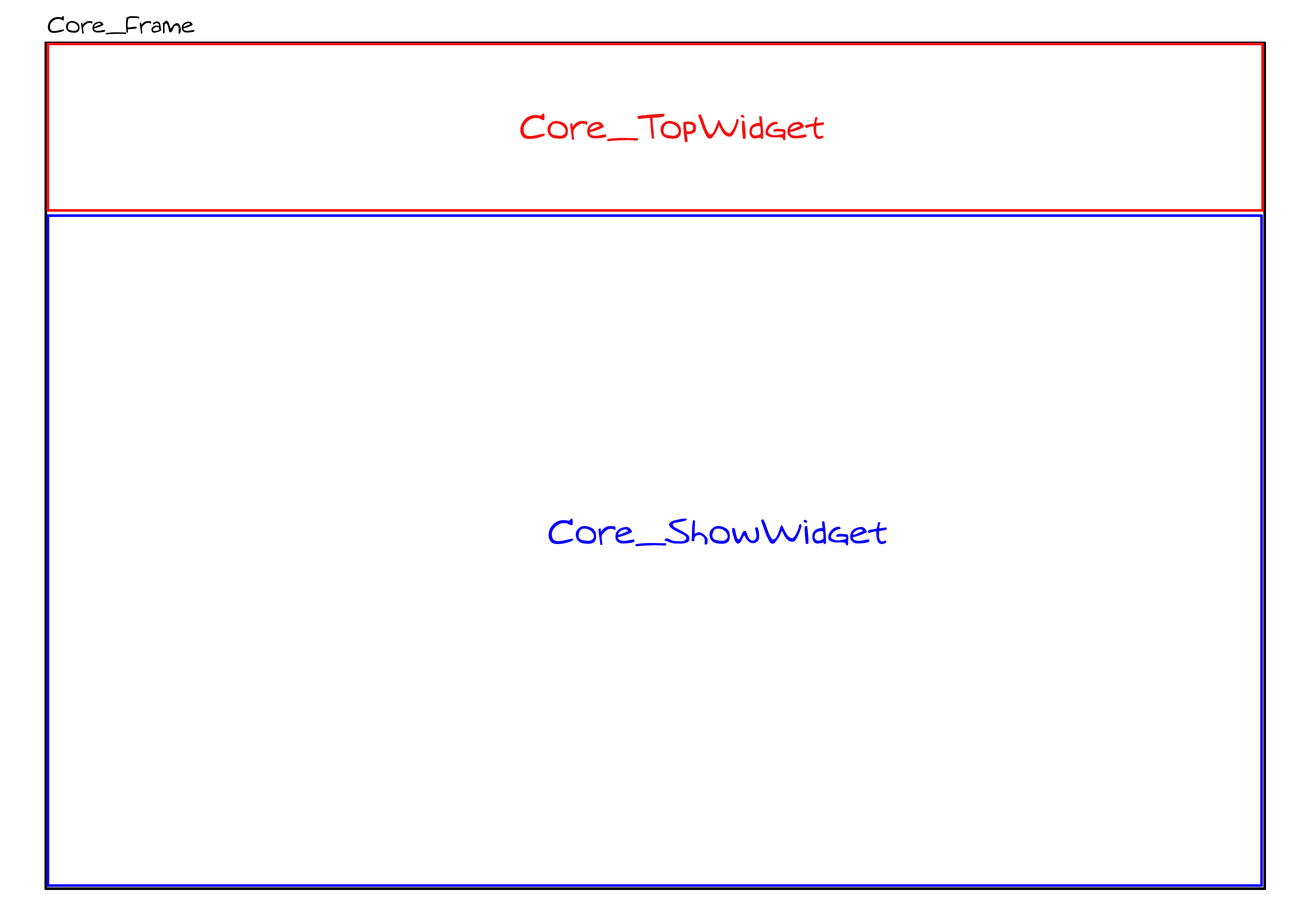
<style>
.page{position:relative;width:1299px;height:918px;background:#ffffff}
.page>*{position:absolute;margin:0}
.t1{font:21.8px "MTOaugie-Regular";color:#000000}
.t2{font:32.7px "MTOaugie-Regular";color:#f21313}
.t3{font:32.7px "MTOaugie-Regular";color:#0c00f9}
</style>
<div class="page">
<p class="t1" style="left:48px;top:16px;width:146px;height:19px">Core_Frame</p>
<p class="t2" style="left:520px;top:113px;width:304px;height:29px">Core_TopWidget</p>
<p class="t3" style="left:548px;top:519px;width:339px;height:28px">Core_ShowWidget</p>
</div>
